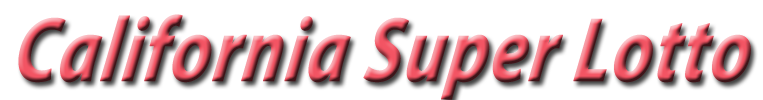
<style>
.page{position:relative;width:763px;height:100px;background:#ffffff}
.page>*{position:absolute;margin:0}
.t1{font:92px "MyriadPro-BoldIt";font-weight:bold;font-style:italic;scale:0.79 1}
</style>
<div class="page">
<p class="t1" style="left:18px;top:14px;width:733px;height:86px">California Super Lotto</p>
</div>
